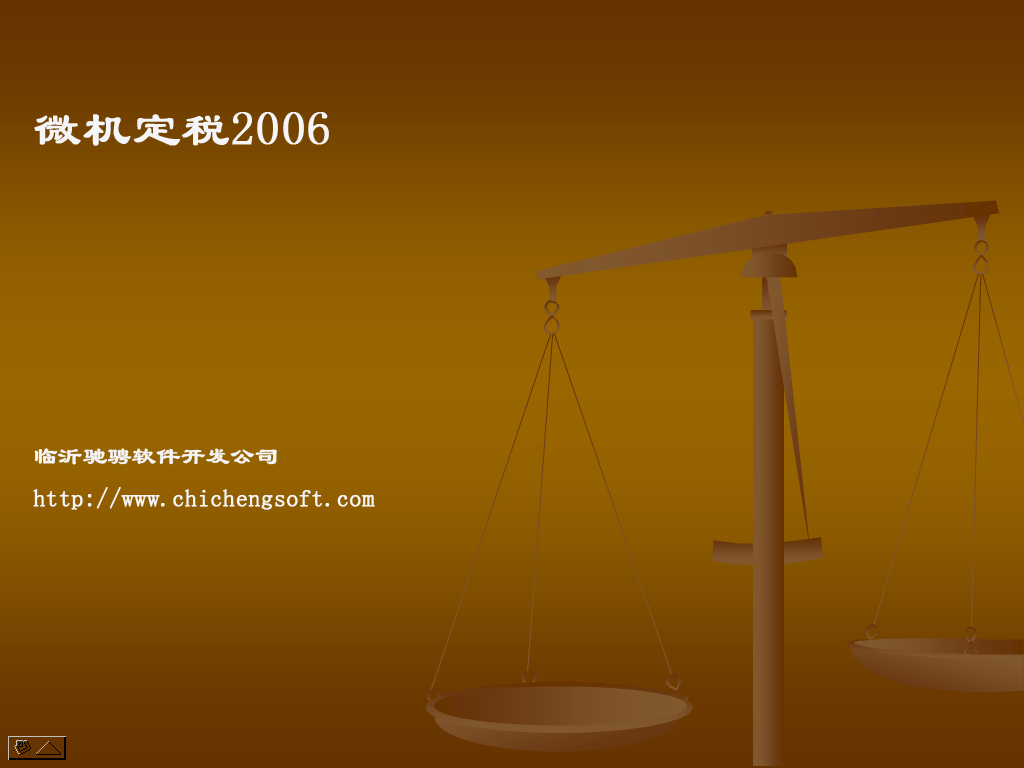
<style>
.page{position:relative;width:1024px;height:768px}
.page>*{position:absolute;margin:0}
.t1{font:24px "LiSu";color:#f4f4f9;font-weight:bold}
.t2{font:48px "LiSu";color:#f4f4f9;font-weight:bold}
.t3{font:36px "LiSu";color:#f4f4f9;font-weight:bold}
</style>
<div class="page">
<p class="t1" style="left:33px;top:112px;width:342px;height:398px"><span class="t2">微机定税2006<br><br><br><br><br></span>临沂驰骋软件开发公司<br>http://www.chichengsoft.com<br><span class="t3"></span></p>
</div>
